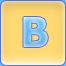
<style>
.page{position:relative;width:66px;height:66px}
.page>*{position:absolute;margin:0}
.t1{font:41px "Tahoma-Bold"}
</style>
<div class="page">
<p class="t1" style="left:23px;top:17px;width:25px;height:30px">В</p>
<p class="t1" style="left:23px;top:17px;width:25px;height:30px">В</p>
</div>
